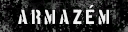
<style>
.page{position:relative;width:128px;height:32px;background:#000000}
.page>*{position:absolute;margin:0}
.t1{font:20.3px "ArialMT";letter-spacing:0.15em;color:#f0f0f0;text-transform:uppercase;scale:1.12 1}
.t2{font:16.1px "BostonTraffic";letter-spacing:0.15em;color:#f0f0f0;text-transform:uppercase;scale:1.13 1}
</style>
<div class="page">
<p class="t1" style="left:89px;top:5px;width:5px;height:3px">´</p>
<p class="t2" style="left:18px;top:9px;width:91px;height:16px">armazem</p>
</div>
